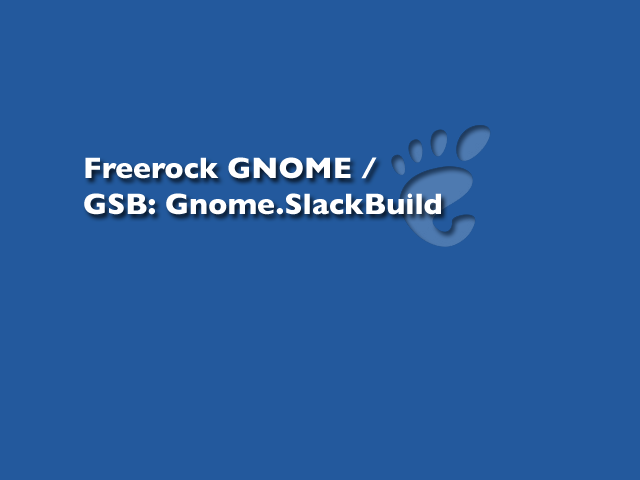
<style>
.page{position:relative;width:640px;height:480px;background:#23599d}
.page>*{position:absolute;margin:0}
.t1{font:30px "GillSans-Bold";color:#ffffff}
</style>
<div class="page">
<p class="t1" style="left:84px;top:157px;width:357px;height:58px">Freerock GNOME /<br>GSB: Gnome.SlackBuild</p>
</div>
